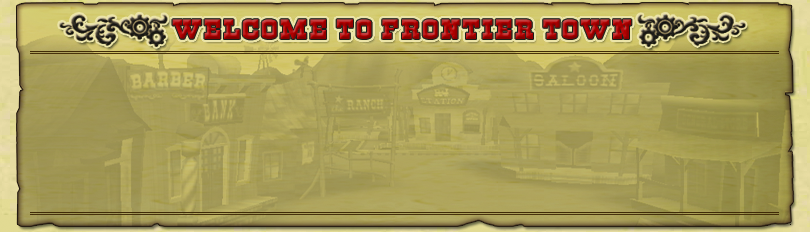
<style>
.page{position:relative;width:810px;height:232px}
.page>*{position:absolute;margin:0}
.t1{font:20.8px "Cowboys";letter-spacing:0.07em}
</style>
<div class="page">
<p class="t1" style="left:172px;top:19px;width:460px;height:21px">WELCOME TO frontier town</p>
</div>
